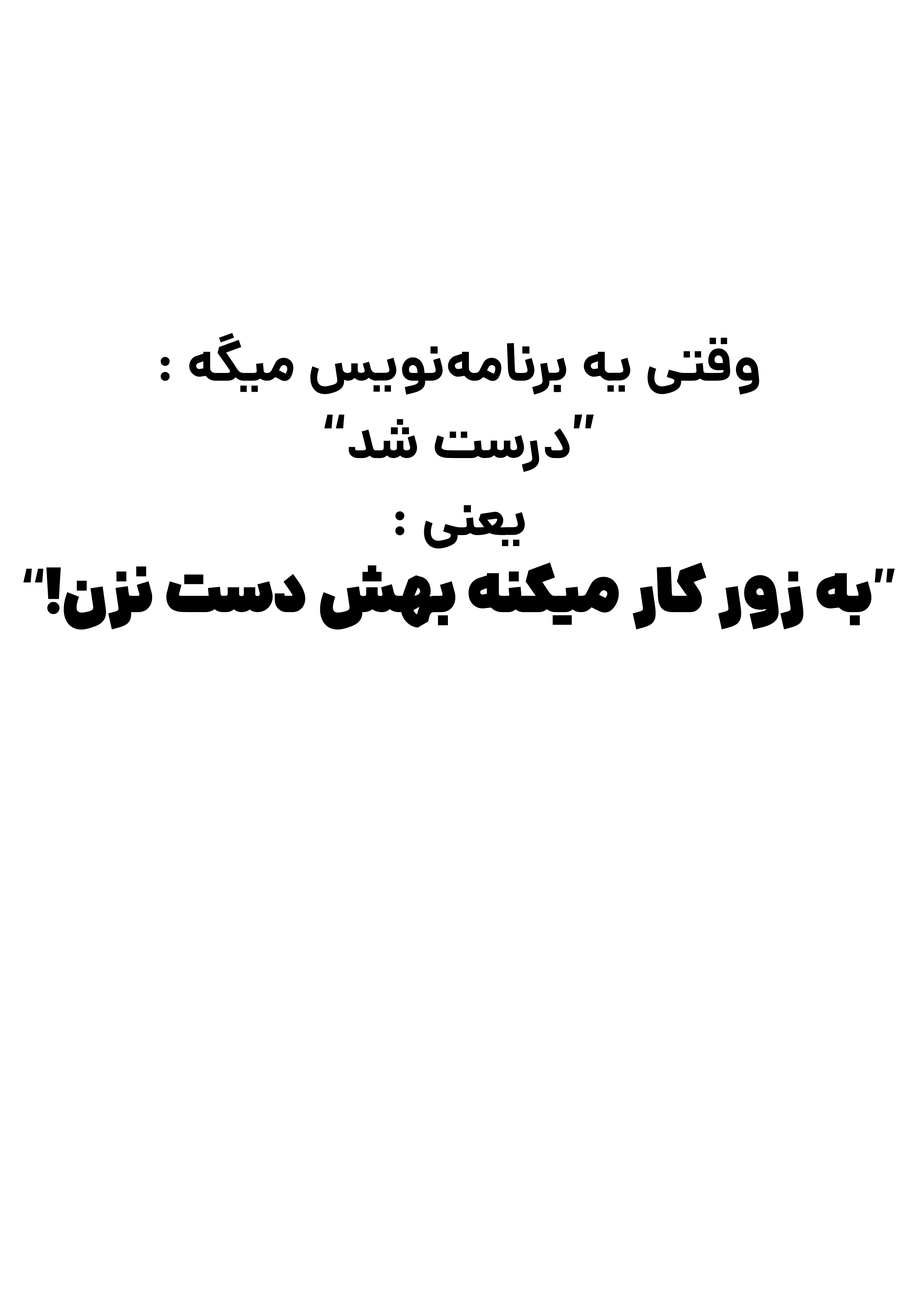
<style>
.page{position:relative;width:918px;height:1299px;background:#ffffff}
.page>*{position:absolute;margin:0}
.t1{font:54.2px/77.1px "Dana-Bold";color:#000000}
.t2{font:54.2px/77.1px "Dana-fat";color:#000000}
</style>
<div class="page">
<p class="t1" style="left:23px;top:333px;width:872px;height:297px;text-align:center">وقتی یه برنامه‌نویس میگه :<br>“درست شد”<br>یعنی :<br>“<span class="t2">به زور کار میکنه بهش دست نزن!</span>”</p>
</div>
